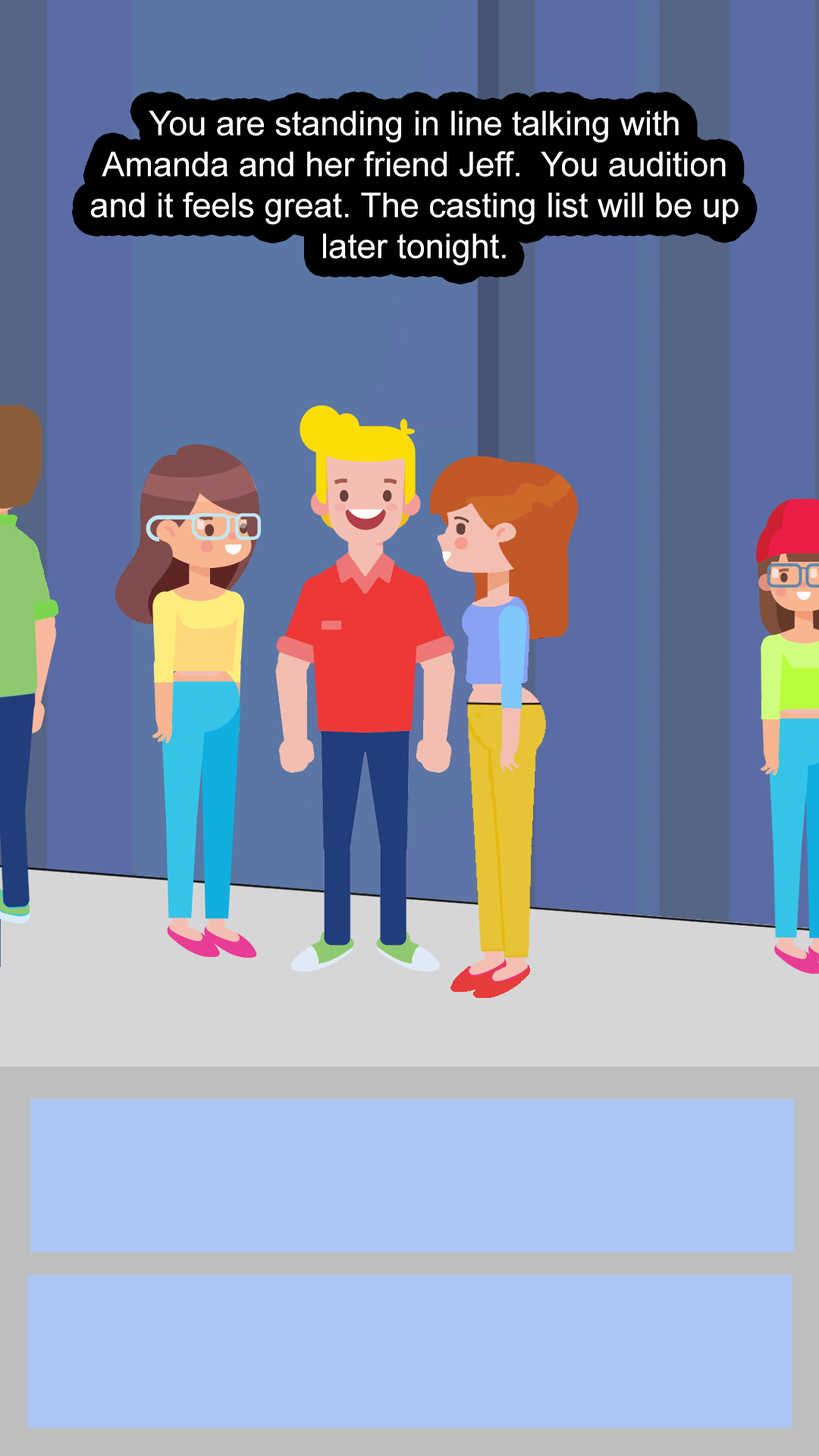
<style>
.page{position:relative;width:819px;height:1456px;background:#aec6f5}
.page>*{position:absolute;margin:0}
.t1{font:34.1px "ArialMT";color:#ffffff}
</style>
<div class="page">
<p class="t1" style="left:91px;top:111px;width:648px;height:154px;text-align:center">You are standing in line talking with Amanda and her friend Jeff.  You audition and it feels great. The casting list will be up later tonight.</p>
</div>
